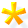
<style>
.page{position:relative;width:28px;height:28px;background:#ffffff}
.page>*{position:absolute;margin:0}
.t1{font:77px "ArialMT"}
</style>
<div class="page">
<p class="t1" style="left:1px;top:2px;width:26px;height:23px">*</p>
</div>
